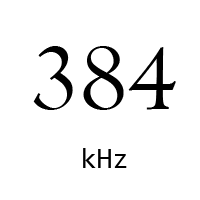
<style>
.page{position:relative;width:200px;height:200px;background:#ffffff}
.page>*{position:absolute;margin:0}
.t1{font:100px "Centaur";color:#000000}
.t2{font:29.2px "Consolas";color:#000000}
</style>
<div class="page">
<p class="t1" style="left:33px;top:46px;width:143px;height:64px">384</p>
<p class="t2" style="left:83px;top:148px;width:44px;height:20px">kHz</p>
</div>
